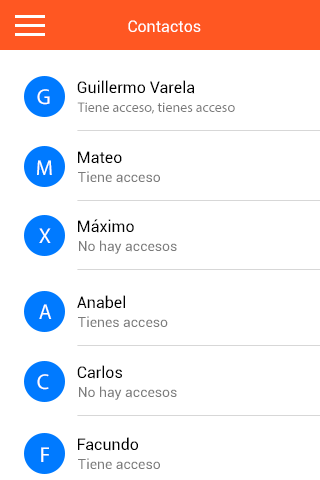
<style>
.page{position:relative;width:320px;height:480px;background:#ffffff}
.page>*{position:absolute;margin:0}
.t1{font:16px "Roboto-Regular";color:#ffffff}
.t2{font:21.4px "MyriadPro-Regular";color:#ffffff}
.t3{font:16px "Roboto-Regular";color:#000000}
.t4{font:14px "MyriadPro-Regular";color:#7b7b7b}
.t5{font:14px "Roboto-Regular";color:#7b7b7b}
</style>
<div class="page">
<p class="t1" style="left:128px;top:20px;width:73px;height:13px">Contactos</p>
<p class="t2" style="left:37px;top:89px;width:13px;height:16px">G</p>
<p class="t3" style="left:77px;top:80px;width:118px;height:14px">Guillermo Varela</p>
<p class="t4" style="left:77px;top:102px;width:158px;height:12px">Tiene acceso, tienes acceso</p>
<p class="t2" style="left:37px;top:160px;width:15px;height:15px">M</p>
<p class="t3" style="left:78px;top:151px;width:44px;height:13px">Mateo</p>
<p class="t5" style="left:78px;top:171px;width:82px;height:12px">Tiene acceso</p>
<p class="t3" style="left:78px;top:219px;width:56px;height:14px">Máximo</p>
<p class="t2" style="left:39px;top:228px;width:12px;height:15px">X</p>
<p class="t5" style="left:79px;top:240px;width:98px;height:14px">No hay accesos</p>
<p class="t2" style="left:39px;top:304px;width:13px;height:15px">A</p>
<p class="t3" style="left:77px;top:295px;width:48px;height:14px">Anabel</p>
<p class="t5" style="left:78px;top:316px;width:90px;height:12px">Tienes acceso</p>
<p class="t3" style="left:77px;top:365px;width:45px;height:14px">Carlos</p>
<p class="t2" style="left:37px;top:374px;width:12px;height:16px">C</p>
<p class="t5" style="left:79px;top:386px;width:98px;height:14px">No hay accesos</p>
<p class="t3" style="left:78px;top:437px;width:60px;height:14px">Facundo</p>
<p class="t2" style="left:41px;top:447px;width:8px;height:15px">F</p>
<p class="t5" style="left:78px;top:458px;width:82px;height:12px">Tiene acceso</p>
</div>
